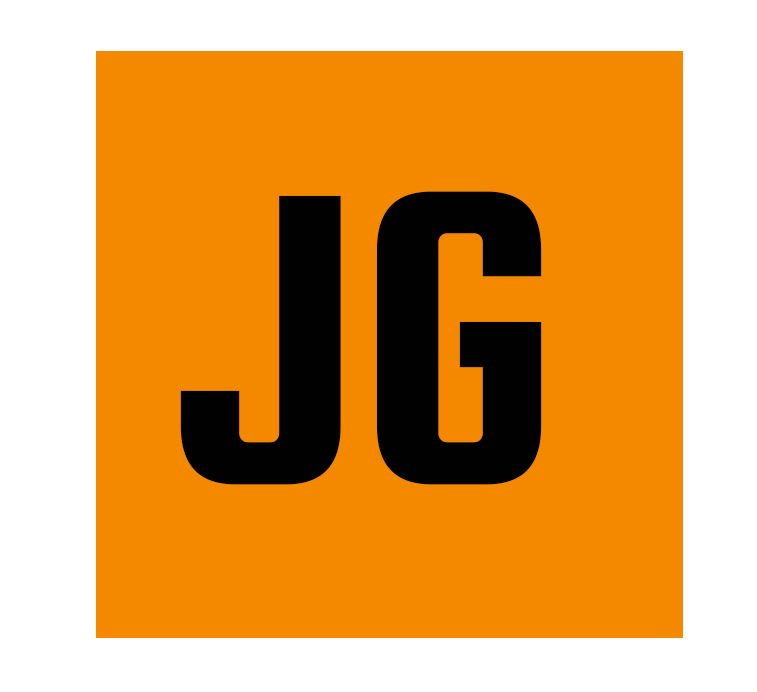
<style>
.page{position:relative;width:757px;height:692px;background:#f48900}
.page>*{position:absolute;margin:0}
.t1{font:439.5px "SquadaOne-Regular";color:#010101}
</style>
<div class="page">
<p class="t1" style="left:180px;top:191px;width:362px;height:294px">JG</p>
</div>
